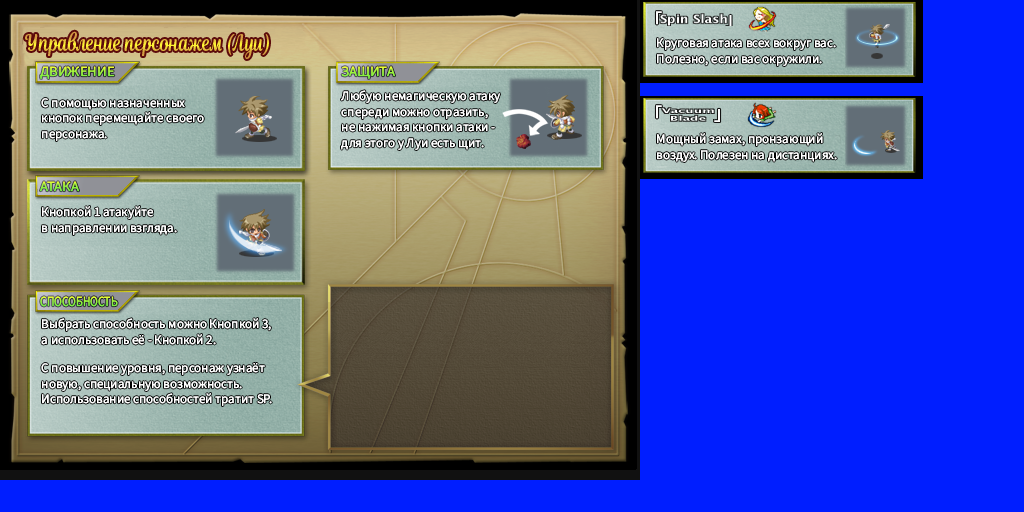
<style>
.page{position:relative;width:1024px;height:512px;background:#001eff}
.page>*{position:absolute;margin:0}
.t1{font:13px "SourceSansRoman-Regular";color:#ffffff}
.t2{font:14px "SourceSansRoman-Regular";scale:1.05 1}
.t3{font:14px "SourceSansRoman-Regular";scale:0.83 1}
</style>
<div class="page">
<p class="t1" style="left:657px;top:38px;width:179px;height:28px">Круговая атака всех вокруг вас.<br>Полезно, если вас окружили.</p>
<p class="t2" style="left:40px;top:66px;width:75px;height:13px">ДВИЖЕНИЕ</p>
<p class="t2" style="left:341px;top:66px;width:54px;height:13px">ЗАЩИТА</p>
<p class="t1" style="left:41px;top:98px;width:163px;height:43px">С помощью назначенных<br>кнопок перемещайте своего<br>персонажа.</p>
<p class="t1" style="left:341px;top:90px;width:159px;height:60px">Любую немагическую атаку<br>спереди можно отразить,<br>не нажимая кнопки атаки -<br>для этого у Луи есть щит.</p>
<p class="t1" style="left:657px;top:133px;width:180px;height:29px">Мощный замах, пронзающий<br>воздух. Полезен на дистанциях.</p>
<p class="t2" style="left:40px;top:181px;width:39px;height:11px">АТАКА</p>
<p class="t1" style="left:42px;top:206px;width:135px;height:29px">Кнопкой 1 атакуйте<br>в направлении взгляда.</p>
<p class="t3" style="left:40px;top:296px;width:78px;height:11px">СПОСОБНОСТЬ</p>
<p class="t1" style="left:41px;top:318px;width:230px;height:27px">Выбрать способность можно Кнопкой 3,<br>а использовать её - Кнопкой 2.</p>
<p class="t1" style="left:41px;top:363px;width:231px;height:43px">С повышение уровня, персонаж узнаёт<br>новую, специальную возможность.<br>Использование способностей тратит SP.</p>
</div>
